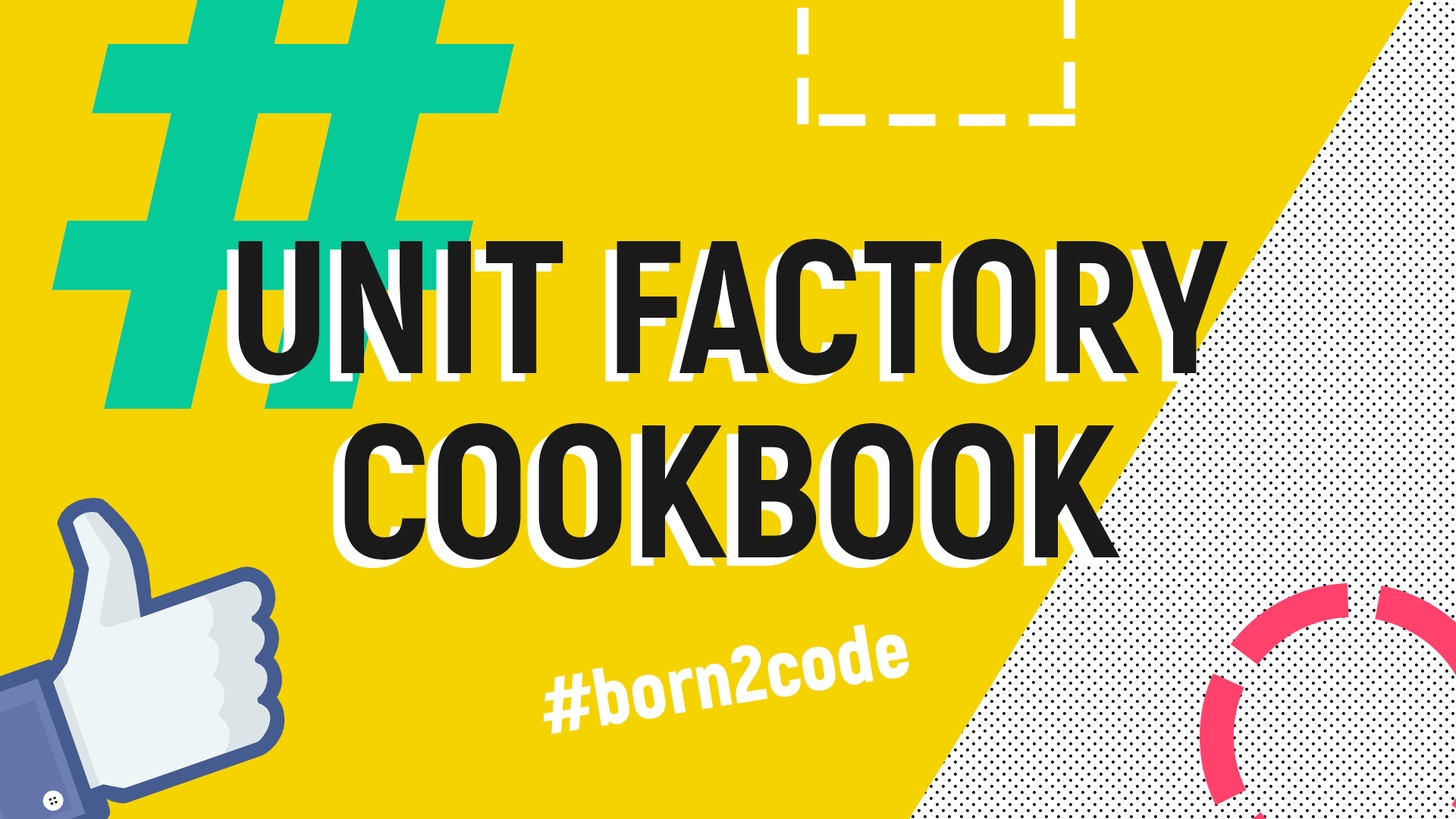
<style>
.page{position:relative;width:1456px;height:819px;background:#f5d300}
.page>*{position:absolute;margin:0}
.t1{font:188px/184.2px "Akrobat-ExtraBold";color:#1a1a1a}
.t2{font:79px "Akrobat-Black";color:#ffffff}
</style>
<div class="page">
<p class="t1" style="left:238px;top:239px;width:990px;height:321px;text-align:center">UNIT FACTORY<br>COOKBOOK</p>
<p class="t2" style="left:543px;top:624px;width:366px;height:110px;rotate:-9deg">#born2code</p>
</div>
